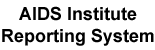
<style>
.page{position:relative;width:155px;height:50px;background:#ffffff}
.page>*{position:absolute;margin:0}
.t1{font:18px "Arial-BoldMT";color:#000000}
</style>
<div class="page">
<p class="t1" style="left:2px;top:6px;width:152px;height:40px;text-align:center">AIDS Institute<br>Reporting System</p>
</div>
